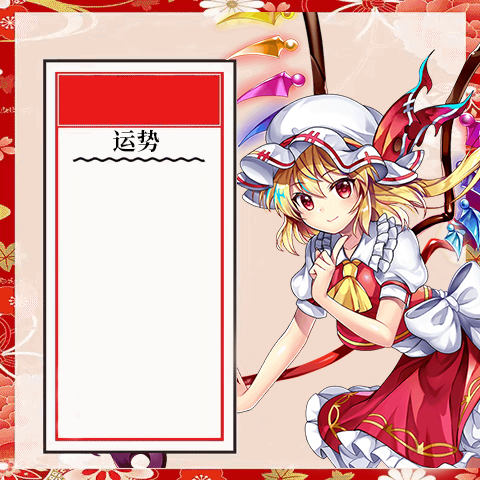
<style>
.page{position:relative;width:480px;height:480px;background:#fcfaf9}
.page>*{position:absolute;margin:0}
.t1{font:24px "NotoSerifSC-Bold";color:#000000}
</style>
<div class="page">
<p class="t1" style="left:113px;top:129px;width:46px;height:23px">运势</p>
</div>
